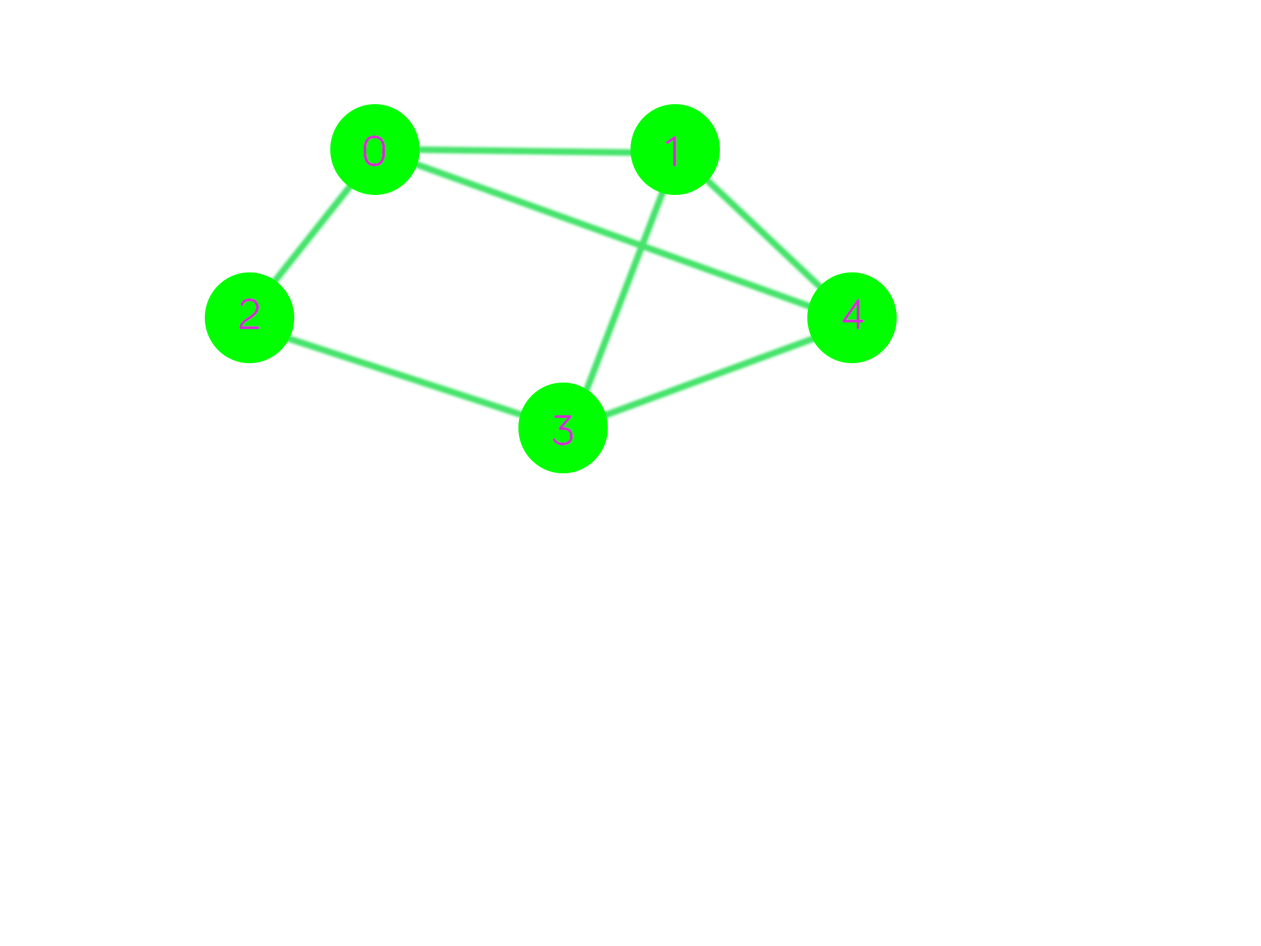
<style>
.page{position:relative;width:1261px;height:946px;background:#ffffff}
.page>*{position:absolute;margin:0}
.t1{font:44.5px "Bariol-Regular";letter-spacing:0.02em;color:#cc33cc}
</style>
<div class="page">
<p class="t1" style="left:363px;top:135px;width:23px;height:31px">0</p>
<p class="t1" style="left:666px;top:136px;width:11px;height:30px">1</p>
<p class="t1" style="left:240px;top:298px;width:20px;height:31px">2</p>
<p class="t1" style="left:842px;top:299px;width:22px;height:30px">4</p>
<p class="t1" style="left:552px;top:415px;width:21px;height:30px">3</p>
</div>
